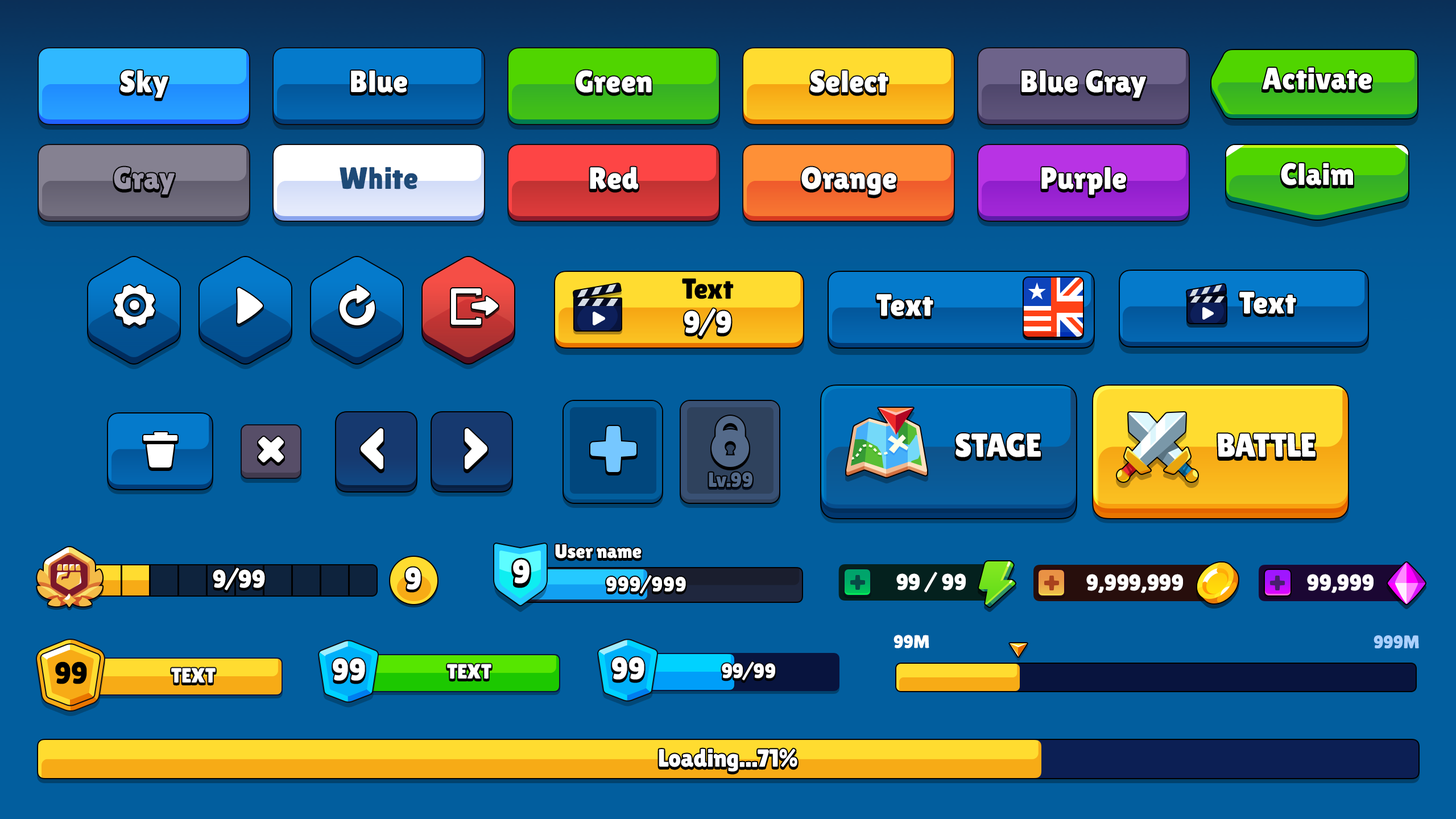
<style>
.page{position:relative;width:1456px;height:819px;background:#025e9e}
.page>*{position:absolute;margin:0}
.t1{font:30.7px "LilitaOne";letter-spacing:0.02em;color:#ffffff}
.t2{font:30.7px "LilitaOne";letter-spacing:0.02em;color:#9a95a7}
.t3{font:30.7px "LilitaOne";letter-spacing:0.02em;color:#1e4a77}
.t4{font:28.8px "LilitaOne";color:#000000}
.t5{font:33px "LilitaOne";color:#ffffff;text-transform:uppercase}
.t6{font:20.5px "LilitaOne";color:#546a8a}
.t7{font:19.3px "LilitaOne";color:#ffffff}
.t8{font:25px "LilitaOne";color:#ffffff}
.t9{font:30.7px "LilitaOne";color:#ffffff;text-transform:uppercase}
.t10{font:33px "LilitaOne";color:#ffffff}
.t11{font:20.5px "LilitaOne";letter-spacing:0.02em;color:#ffffff}
.t12{font:22.7px "LilitaOne";letter-spacing:-0.01em;color:#ffffff;text-transform:uppercase}
.t13{font:18.2px "LilitaOne";color:#ffffff}
.t14{font:18.2px "LilitaOne";color:#aad0fd;text-transform:uppercase}
.t15{font:30.7px "LilitaOne";color:#000000;text-transform:uppercase}
.t16{font:20.5px "LilitaOne";color:#ffffff}
.t17{font:20.5px "LilitaOne";color:#ffffff;text-transform:uppercase}
</style>
<div class="page">
<p class="t1" style="left:120px;top:70px;width:49px;height:28px">Sky</p>
<p class="t1" style="left:351px;top:71px;width:56px;height:22px">Blue</p>
<p class="t1" style="left:576px;top:70px;width:76px;height:23px">Green</p>
<p class="t1" style="left:810px;top:70px;width:78px;height:23px">Select</p>
<p class="t1" style="left:1021px;top:70px;width:126px;height:28px">Blue Gray</p>
<p class="t1" style="left:1262px;top:67px;width:110px;height:23px">Activate</p>
<p class="t2" style="left:114px;top:167px;width:61px;height:28px">Gray</p>
<p class="t3" style="left:340px;top:167px;width:77px;height:22px">White</p>
<p class="t1" style="left:590px;top:167px;width:49px;height:22px">Red</p>
<p class="t1" style="left:801px;top:167px;width:95px;height:28px">Orange</p>
<p class="t1" style="left:1041px;top:167px;width:85px;height:28px">Purple</p>
<p class="t1" style="left:1281px;top:163px;width:72px;height:22px">Claim</p>
<p class="t4" style="left:682px;top:278px;width:52px;height:21px">Text</p>
<p class="t1" style="left:1239px;top:292px;width:57px;height:22px">Text</p>
<p class="t1" style="left:876px;top:294px;width:57px;height:22px">Text</p>
<p class="t1" style="left:684px;top:308px;width:47px;height:28px">9/9</p>
<p class="t5" style="left:955px;top:433px;width:86px;height:24px">Stage</p>
<p class="t5" style="left:1218px;top:433px;width:98px;height:24px">Battle</p>
<p class="t6" style="left:709px;top:472px;width:43px;height:15px">Lv.99</p>
<p class="t7" style="left:555px;top:544px;width:87px;height:15px">User name</p>
<p class="t8" style="left:213px;top:568px;width:52px;height:22px">9/99</p>
<p class="t9" style="left:406px;top:567px;width:15px;height:23px">9</p>
<p class="t10" style="left:513px;top:559px;width:16px;height:25px">9</p>
<p class="t11" style="left:606px;top:575px;width:80px;height:19px">999/999</p>
<p class="t12" style="left:896px;top:572px;width:70px;height:21px">99 / 99</p>
<p class="t12" style="left:1086px;top:574px;width:97px;height:19px">9,999,999</p>
<p class="t12" style="left:1307px;top:574px;width:67px;height:19px">99,999</p>
<p class="t13" style="left:893px;top:635px;width:36px;height:13px">99M</p>
<p class="t14" style="left:1374px;top:635px;width:45px;height:13px">999m</p>
<p class="t15" style="left:55px;top:661px;width:32px;height:23px">99</p>
<p class="t9" style="left:333px;top:658px;width:32px;height:23px">99</p>
<p class="t16" style="left:447px;top:664px;width:44px;height:15px">TEXT</p>
<p class="t9" style="left:612px;top:657px;width:32px;height:23px">99</p>
<p class="t17" style="left:722px;top:661px;width:53px;height:19px">99/99</p>
<p class="t17" style="left:171px;top:668px;width:45px;height:15px">TEXT</p>
<p class="t8" style="left:659px;top:748px;width:138px;height:24px">Loading...71%</p>
</div>
